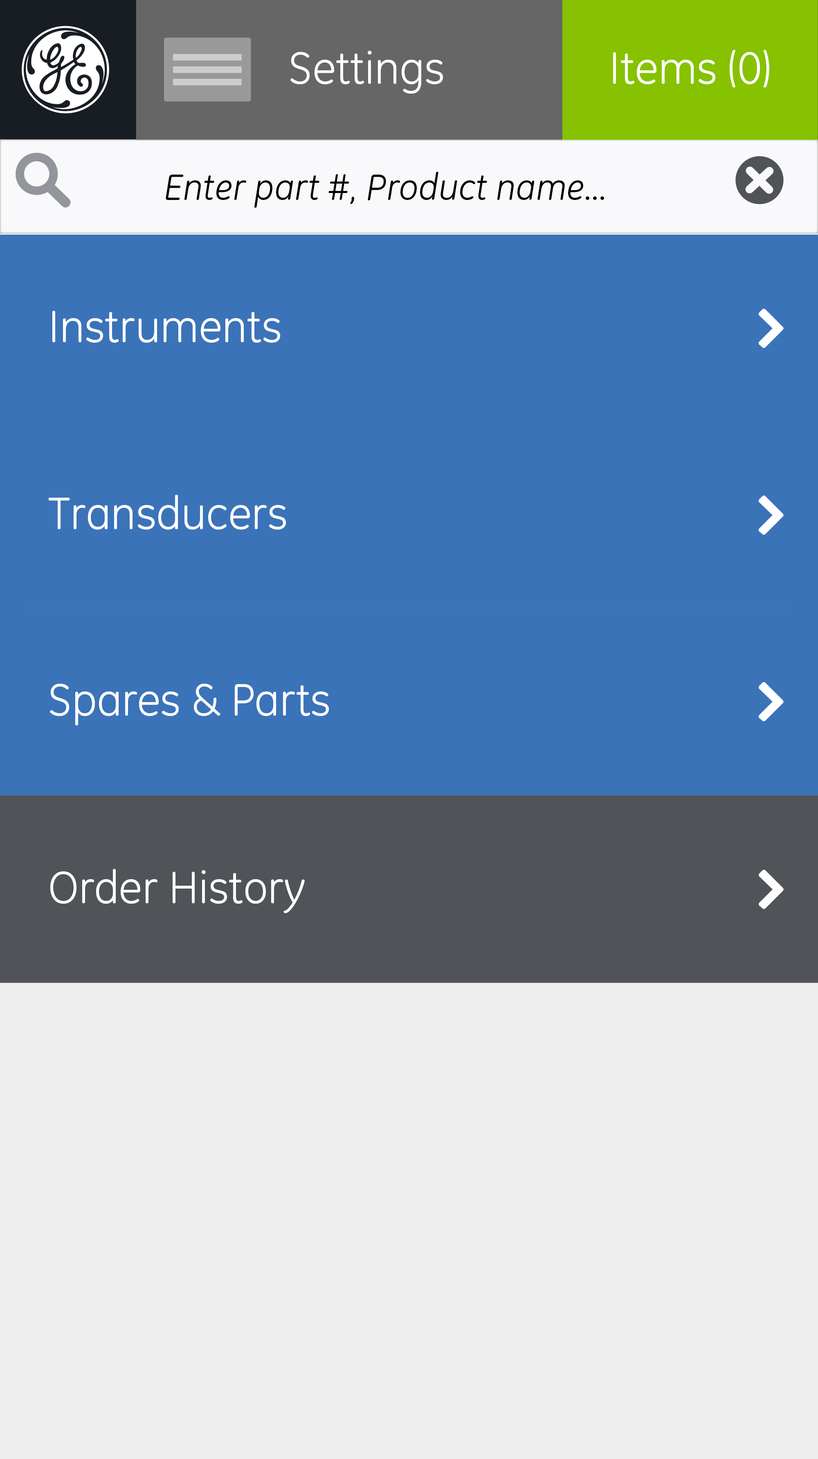
<style>
.page{position:relative;width:818px;height:1459px;background:#3b73b9}
.page>*{position:absolute;margin:0}
.t1{font:46px "GEInspira";color:#ffffff}
.t2{font:37.5px "GEInspira-Italic";color:#000000}
</style>
<div class="page">
<p class="t1" style="left:290px;top:51px;width:153px;height:43px">Settings</p>
<p class="t1" style="left:613px;top:50px;width:156px;height:37px">Items (0)</p>
<p class="t2" style="left:166px;top:172px;width:438px;height:36px">Enter part #, Product name...</p>
<p class="t1" style="left:52px;top:311px;width:228px;height:32px">Instruments</p>
<p class="t1" style="left:48px;top:495px;width:238px;height:35px">Transducers</p>
<p class="t1" style="left:50px;top:683px;width:279px;height:42px">Spares &amp; Parts</p>
<p class="t1" style="left:50px;top:869px;width:255px;height:44px">Order History</p>
</div>
